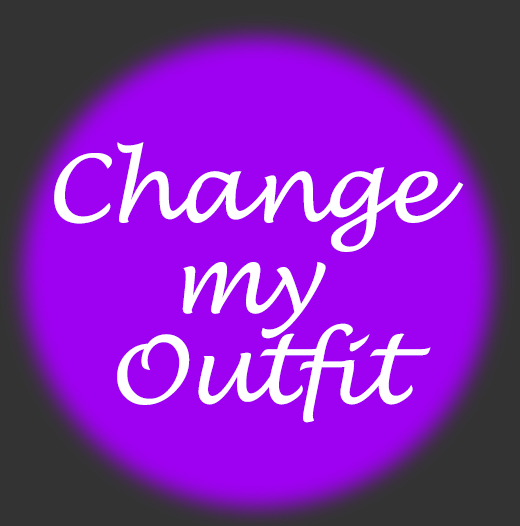
<style>
.page{position:relative;width:520px;height:526px;background:#9e00f2}
.page>*{position:absolute;margin:0}
.t1{font:92.7px/90.7px "LucidaHandwriting-Italic";letter-spacing:-0.02em;color:#ffffff}
</style>
<div class="page">
<p class="t1" style="left:54px;top:142px;width:410px;height:281px;text-align:center">Change <br>my <br>Outfit</p>
</div>
